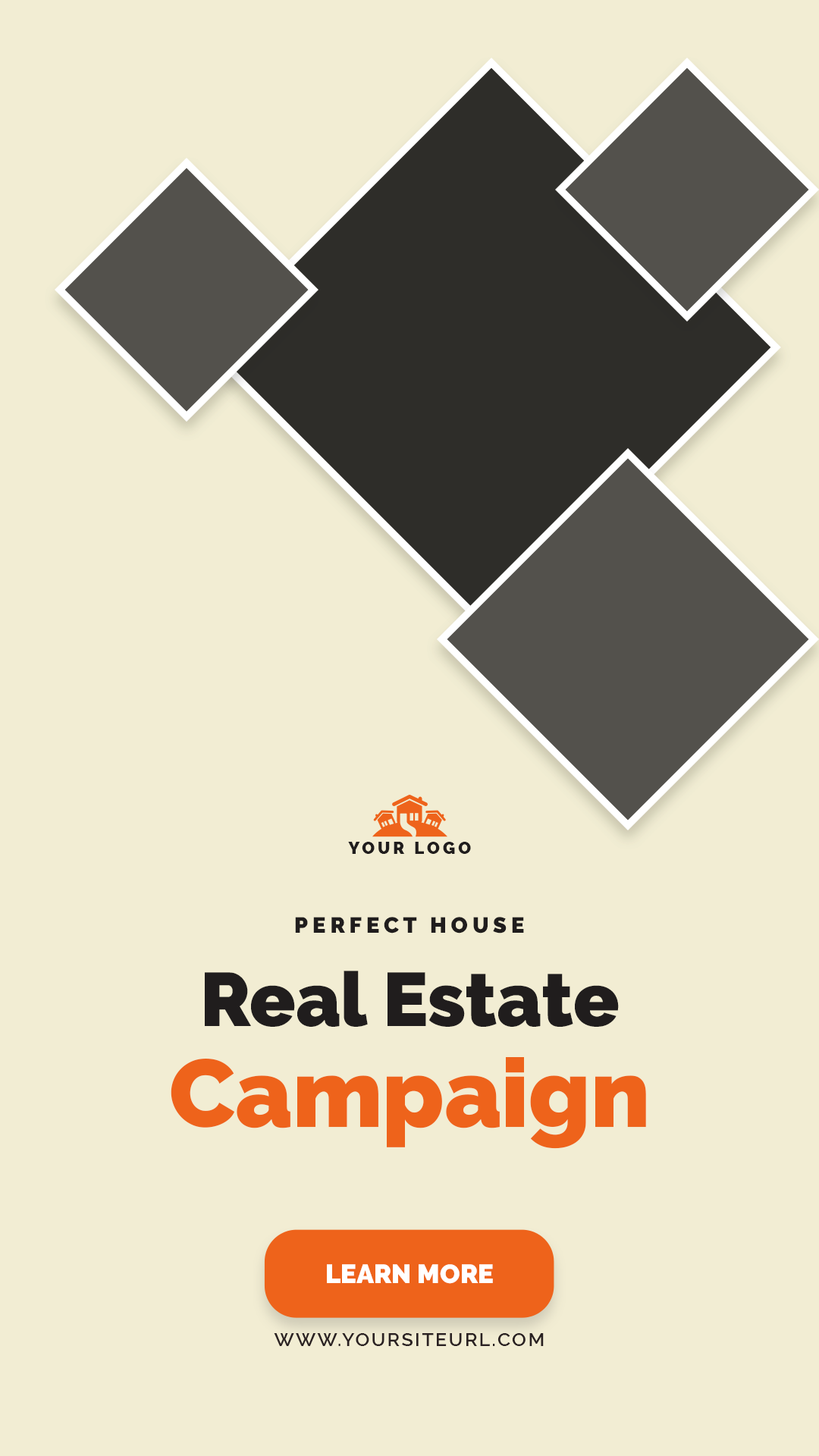
<style>
.page{position:relative;width:819px;height:1456px;background:#f2edd3}
.page>*{position:absolute;margin:0}
.t1{font:16.3px "Raleway-Black";letter-spacing:0.2em;color:#201d1d;text-transform:uppercase}
.t2{font:22px "Raleway-Black";letter-spacing:0.2em;color:#201d1d;text-transform:uppercase}
.t3{font:75.4px/100.5px "Raleway-Black";color:#201d1d}
.t4{font:95.5px/100.5px "Raleway-Black";color:#ee631b}
.t5{font:26.4px "Raleway-Black";color:#ffffff;text-transform:uppercase}
.t6{font:18.9px "Raleway-SemiBold";letter-spacing:0.1em;color:#2a2122;text-transform:uppercase}
</style>
<div class="page">
<p class="t1" style="left:348px;top:842px;width:123px;height:12px">your logo</p>
<p class="t2" style="left:295px;top:917px;width:229px;height:16px">perfect house</p>
<p class="t3" style="left:171px;top:971px;width:475px;height:178px;text-align:center">Real Estate<br><span class="t4">Campaign</span></p>
<p class="t5" style="left:327px;top:1264px;width:166px;height:20px">learn more</p>
<p class="t6" style="left:274px;top:1333px;width:270px;height:13px">www.yoursiteurl.com</p>
</div>
